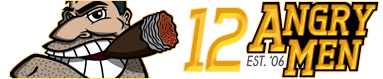
<style>
.page{position:relative;width:383px;height:79px;background:#ffffff}
.page>*{position:absolute;margin:0}
.t1{font:43.2px "Tertre-ExtraBold";font-style:italic;scale:0.83 1}
.t2{font:66px "Tertre-ExtraBold";letter-spacing:-0.05em;font-style:italic;scale:0.83 1}
.t3{font:90px "Tertre-ExtraBold";font-style:italic;scale:0.83 1}
.t4{font:42px "Tertre-ExtraBold";letter-spacing:0.05em;font-style:italic;scale:0.83 1}
.t5{font:50.4px "Tertre-ExtraBold";letter-spacing:0.04em;font-style:italic;scale:0.83 1}
.t6{font:14.4px "Champagne&Limousines-Bold";color:#4a4a4a;font-style:italic;scale:0.83 1}
</style>
<div class="page">
<p class="t1" style="left:249px;top:5px;width:127px;height:46px"><span class="t2">A</span>NGRY</p>
<p class="t3" style="left:184px;top:8px;width:64px;height:63px">12</p>
<p class="t4" style="left:284px;top:40px;width:78px;height:35px"><span class="t5">M</span>EN</p>
<p class="t6" style="left:246px;top:55px;width:38px;height:12px">EST. ‘06</p>
</div>
